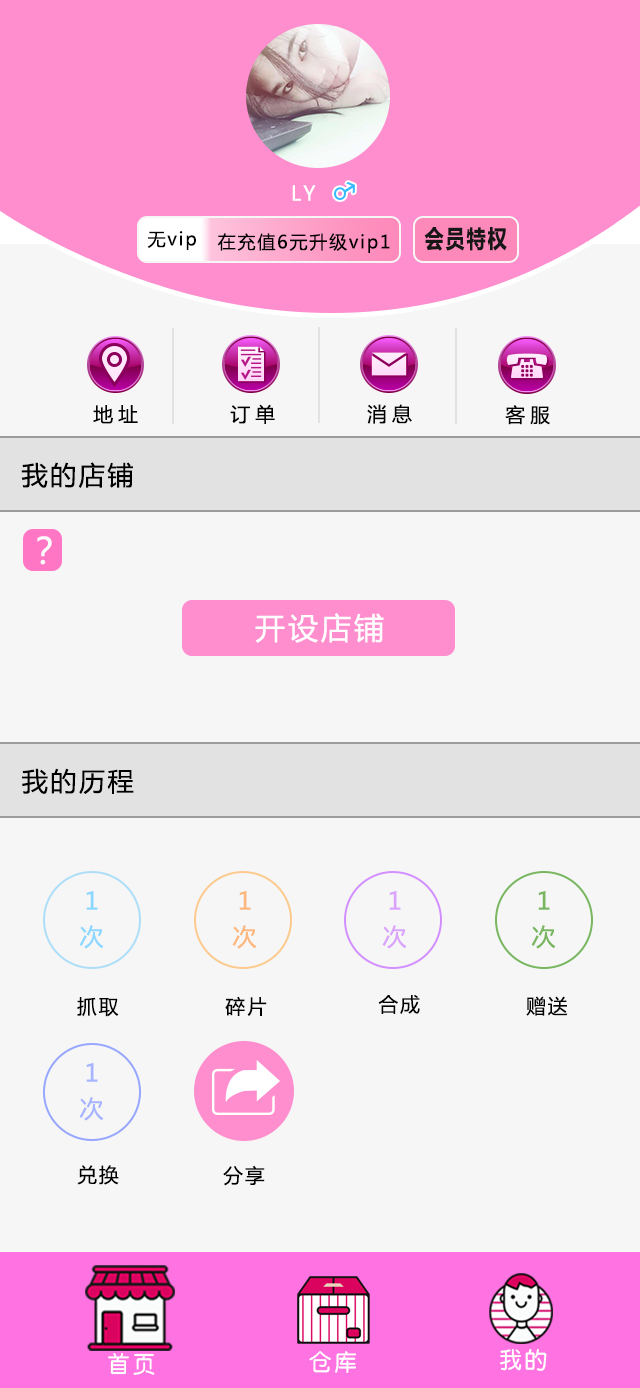
<style>
.page{position:relative;width:640px;height:1388px;background:#f6f6f6}
.page>*{position:absolute;margin:0}
.t1{font:20px "MicrosoftYaHei";letter-spacing:0.1em;color:#ffffff}
.t2{font:18px "MicrosoftYaHei";letter-spacing:0.1em;color:#000000}
.t3{font:24px "MicrosoftYaHei-Bold";letter-spacing:0.1em;color:#171717;scale:0.8 1}
.t4{font:19.7px "MicrosoftYaHei";letter-spacing:0.26em;color:#010101}
.t5{font:19.7px "MicrosoftYaHei";letter-spacing:0.26em;color:#000000}
.t6{font:26px "MicrosoftYaHei";letter-spacing:0.1em;color:#000000}
.t7{font:30px "MicrosoftYaHei";letter-spacing:0.1em;color:#ffffff}
.t8{font:26px "MicrosoftYaHei";letter-spacing:0.1em;color:#010101}
.t9{font:24px/35.6px "MicrosoftYaHei";letter-spacing:0.1em;color:#8bd7ff}
.t10{font:24px/35.6px "MicrosoftYaHei";letter-spacing:0.1em;color:#fdb87e}
.t11{font:24px/35.6px "MicrosoftYaHei";letter-spacing:0.1em;color:#daa4fd}
.t12{font:24px/35.6px "MicrosoftYaHei";letter-spacing:0.1em;color:#78b65f}
.t13{font:19.6px "MicrosoftYaHei";letter-spacing:0.1em;color:#000000}
.t14{font:24px/35.6px "MicrosoftYaHei";letter-spacing:0.1em;color:#a7b4ff}
.t15{font:23.3px "By-JOSSQ-DMF-in-BeiJing";letter-spacing:0.096em;color:#ffffff}
</style>
<div class="page">
<p class="t1" style="left:292px;top:185px;width:24px;height:16px">LY</p>
<p class="t2" style="left:147px;top:231px;width:49px;height:19px">无vip</p>
<p class="t2" style="left:217px;top:233px;width:173px;height:20px">在充值6元升级vip1</p>
<p class="t3" style="left:424px;top:227px;width:83px;height:24px">会员特权</p>
<p class="t4" style="left:93px;top:405px;width:45px;height:19px">地址</p>
<p class="t5" style="left:230px;top:404px;width:45px;height:20px">订单</p>
<p class="t5" style="left:367px;top:404px;width:45px;height:20px">消息</p>
<p class="t5" style="left:505px;top:405px;width:45px;height:20px">客服</p>
<p class="t6" style="left:21px;top:462px;width:112px;height:26px">我的店铺</p>
<p class="t7" style="left:255px;top:613px;width:129px;height:30px">开设店铺</p>
<p class="t8" style="left:22px;top:768px;width:112px;height:26px">我的历程</p>
<p class="t9" style="left:79px;top:891px;width:25px;height:58px">1<br>次</p>
<p class="t10" style="left:232px;top:891px;width:25px;height:58px">1<br>次</p>
<p class="t11" style="left:382px;top:891px;width:25px;height:58px">1<br>次</p>
<p class="t12" style="left:531px;top:891px;width:25px;height:58px">1<br>次</p>
<p class="t13" style="left:77px;top:997px;width:42px;height:20px">抓取</p>
<p class="t13" style="left:225px;top:996px;width:42px;height:20px">碎片</p>
<p class="t13" style="left:378px;top:994px;width:42px;height:20px">合成</p>
<p class="t13" style="left:526px;top:996px;width:42px;height:20px">赠送</p>
<p class="t14" style="left:79px;top:1063px;width:25px;height:58px">1<br>次</p>
<p class="t13" style="left:77px;top:1165px;width:42px;height:20px">兑换</p>
<p class="t13" style="left:223px;top:1165px;width:42px;height:21px">分享</p>
<p class="t15" style="left:500px;top:1349px;width:47px;height:22px">我的</p>
<p class="t15" style="left:108px;top:1353px;width:47px;height:22px">首页</p>
<p class="t15" style="left:309px;top:1351px;width:48px;height:22px">仓库</p>
</div>
